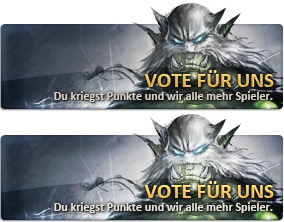
<style>
.page{position:relative;width:284px;height:222px}
.page>*{position:absolute;margin:0}
.t1{font:21px "Calibri-Bold";text-transform:uppercase}
.t2{font:12px "Calibri-Bold";color:#d8d2c6}
.t3{font:12px "Calibri-Bold";color:#e7e4dc}
</style>
<div class="page">
<p class="t1" style="left:144px;top:70px;width:130px;height:17px">Vote für uns</p>
<p class="t2" style="left:54px;top:91px;width:219px;height:11px">Du kriegst Punkte und wir alle mehr Spieler.</p>
<p class="t1" style="left:144px;top:181px;width:130px;height:17px">Vote für uns</p>
<p class="t3" style="left:54px;top:202px;width:219px;height:11px">Du kriegst Punkte und wir alle mehr Spieler.</p>
</div>
